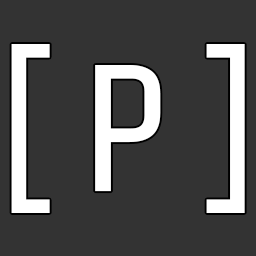
<style>
.page{position:relative;width:256px;height:256px;background:#333333}
.page>*{position:absolute;margin:0}
.t1{font:180px "ShareTechMono-Regular";color:#ffffff;text-transform:uppercase}
</style>
<div class="page">
<p class="t1" style="left:11px;top:44px;width:234px;height:169px">[P]</p>
</div>
